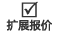
<style>
.page{position:relative;width:57px;height:32px;background:#ffffff}
.page>*{position:absolute;margin:0}
.t1{font:11px "MicrosoftYaHei";letter-spacing:0.01em;color:#333333;font-weight:bold}
</style>
<div class="page">
<p class="t1" style="left:6px;top:19px;width:46px;height:12px">扩展报价</p>
</div>
